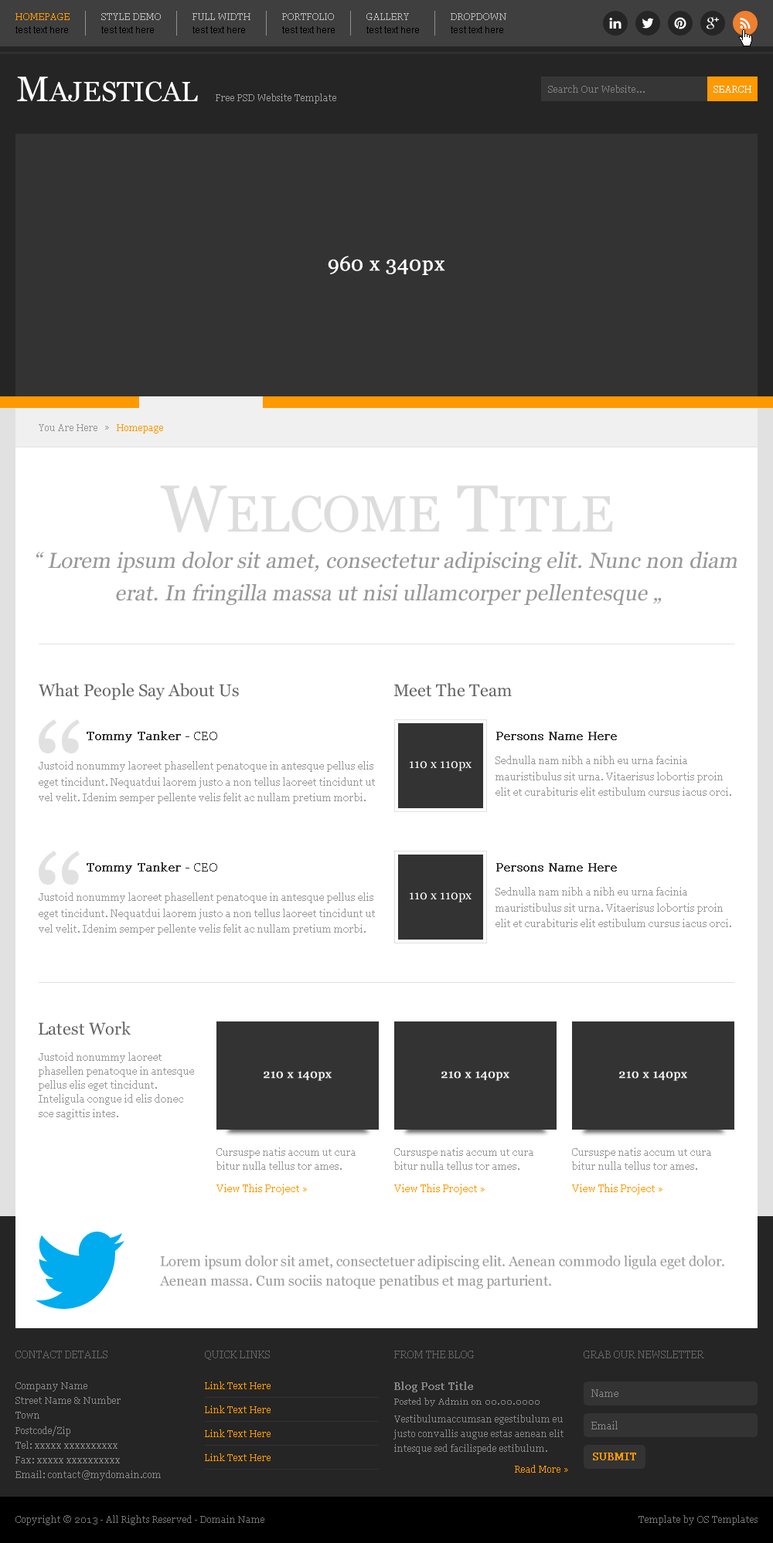
<style>
.page{position:relative;width:773px;height:1543px;background:#ffffff}
.page>*{position:absolute;margin:0}
.t1{font:9.3px "Georgia";color:#ff9900}
.t2{font:9.3px "Georgia";color:#b8b8b8}
.t3{font:9.3px "ArialMT";color:#000000}
.t4{font:27.8px "Georgia";color:#ffffff}
.t5{font:35.5px "Georgia";color:#ffffff}
.t6{font:9.3px "Georgia";color:#7f7f7f}
.t7{font:9.3px "Georgia";color:#ffffff}
.t8{font:9.3px "Georgia";color:#999999}
.t9{font:20.1px "Georgia";color:#ffffff;font-weight:bold}
.t10{font:51px "Georgia";color:#dddddd}
.t11{font:66.5px "Georgia";color:#dddddd}
.t12{font:21.6px/32.5px "Georgia";color:#989898;font-style:italic}
.t13{font:21.6px/21.6px "Georgia";color:#989898;font-style:italic}
.t14{font:17px "Georgia";color:#666666}
.t15{font:12.4px "Georgia";color:#333333;font-weight:bold}
.t16{font:12.4px "Georgia";color:#333333}
.t17{font:10px/16.1px "Georgia";color:#999999}
.t18{font:12.4px "Georgia";color:#ffffff}
.t19{font:10px/14.1px "Georgia";color:#999999}
.t20{font:12.1px "Georgia";color:#f8f8f8;font-weight:bold}
.t21{font:10px/14.1px "Georgia";color:#989898}
.t22{font:10px "Georgia";color:#ff9900}
.t23{font:13.9px/19.5px "Georgia";color:#999999}
.t24{font:10px "Georgia";color:#666666}
.t25{font:9.3px/14.8px "Georgia";color:#868686}
.t26{font:10px "Georgia";color:#868686;font-weight:bold}
.t27{font:8.5px "Georgia";color:#868686}
.t28{font:10px "Georgia";color:#868686}
.t29{font:10px "Georgia";color:#ff9900;font-weight:bold}
.t30{font:9.3px "Georgia";color:#737373}
</style>
<div class="page">
<p class="t1" style="left:15px;top:13px;width:55px;height:7px">HOMEPAGE</p>
<p class="t2" style="left:101px;top:13px;width:60px;height:7px">STYLE DEMO</p>
<p class="t2" style="left:192px;top:13px;width:58px;height:7px">FULL WIDTH</p>
<p class="t2" style="left:282px;top:13px;width:52px;height:7px">PORTFOLIO</p>
<p class="t2" style="left:366px;top:13px;width:43px;height:7px">GALLERY</p>
<p class="t2" style="left:451px;top:13px;width:55px;height:7px">DROPDOWN</p>
<p class="t3" style="left:15px;top:26px;width:53px;height:7px">test text here</p>
<p class="t3" style="left:101px;top:26px;width:53px;height:7px">test text here</p>
<p class="t3" style="left:192px;top:26px;width:53px;height:7px">test text here</p>
<p class="t3" style="left:282px;top:26px;width:53px;height:7px">test text here</p>
<p class="t3" style="left:366px;top:26px;width:53px;height:7px">test text here</p>
<p class="t3" style="left:451px;top:26px;width:52px;height:7px">test text here</p>
<p class="t4" style="left:17px;top:77px;width:181px;height:25px"><span class="t5">M</span>AJESTICAL</p>
<p class="t6" style="left:548px;top:85px;width:96px;height:8px">Search Our Website...</p>
<p class="t7" style="left:713px;top:86px;width:38px;height:7px">SEARCH</p>
<p class="t8" style="left:216px;top:94px;width:120px;height:10px">Free PSD Website Template</p>
<p class="t9" style="left:328px;top:256px;width:117px;height:19px">960 x 340px</p>
<p class="t8" style="left:39px;top:424px;width:58px;height:7px">You Are Here</p>
<p class="t1" style="left:117px;top:424px;width:46px;height:10px">Homepage</p>
<p class="t10" style="left:160px;top:485px;width:453px;height:47px"><span class="t11">W</span>ELCOME<span class="t11"> T</span>ITLE</p>
<p class="t12" style="left:36px;top:551px;width:701px;height:54px;text-align:center"><span class="t13">“</span> Lorem ipsum dolor sit amet, consectetur adipiscing elit. Nunc non diam <br>erat. In fringilla massa ut nisi ullamcorper pellentesque „</p>
<p class="t14" style="left:39px;top:683px;width:200px;height:17px">What People Say About Us</p>
<p class="t14" style="left:393px;top:683px;width:119px;height:14px">Meet The Team</p>
<p class="t15" style="left:87px;top:731px;width:130px;height:12px">Tommy Tanker<span class="t16"> - CEO</span></p>
<p class="t15" style="left:496px;top:732px;width:121px;height:8px">Persons Name Here</p>
<p class="t17" style="left:39px;top:761px;width:336px;height:43px">Justoid nonummy laoreet phasellent penatoque in antesque pellus elis eget tincidunt. Nequatdui laorem justo a non tellus laoreet tincidunt ut vel velit. Idenim semper pellente velis felit ac nullam pretium morbi.</p>
<p class="t18" style="left:410px;top:761px;width:61px;height:10px">110 x 110px</p>
<p class="t17" style="left:495px;top:756px;width:236px;height:40px">Sednulla nam nibh a nibh eu urna facinia mauristibulus sit urna. Vitaerisus lobortis proin elit et curabituris elit estibulum cursus iacus orci.</p>
<p class="t15" style="left:87px;top:862px;width:130px;height:12px">Tommy Tanker<span class="t16"> - CEO</span></p>
<p class="t15" style="left:496px;top:863px;width:121px;height:9px">Persons Name Here</p>
<p class="t17" style="left:39px;top:893px;width:336px;height:42px">Justoid nonummy laoreet phasellent penatoque in antesque pellus elis eget tincidunt. Nequatdui laorem justo a non tellus laoreet tincidunt ut vel velit. Idenim semper pellente velis felit ac nullam pretium morbi.</p>
<p class="t18" style="left:410px;top:893px;width:61px;height:10px">110 x 110px</p>
<p class="t17" style="left:495px;top:887px;width:236px;height:40px">Sednulla nam nibh a nibh eu urna facinia mauristibulus sit urna. Vitaerisus lobortis proin elit et curabituris elit estibulum cursus iacus orci.</p>
<p class="t14" style="left:39px;top:1022px;width:92px;height:13px">Latest Work</p>
<p class="t19" style="left:39px;top:1052px;width:155px;height:68px">Justoid nonummy laoreet phasellen penatoque in antesque pellus elis eget tincidunt. Inteligula congue id elis donec sce sagittis intes.</p>
<p class="t20" style="left:264px;top:1071px;width:68px;height:10px">210 x 140px</p>
<p class="t20" style="left:441px;top:1071px;width:68px;height:10px">210 x 140px</p>
<p class="t20" style="left:619px;top:1071px;width:68px;height:10px">210 x 140px</p>
<p class="t21" style="left:216px;top:1148px;width:139px;height:22px">Cursuspe natis accum ut cura bitur nulla tellus tor ames.</p>
<p class="t21" style="left:394px;top:1148px;width:139px;height:22px">Cursuspe natis accum ut cura bitur nulla tellus tor ames.</p>
<p class="t21" style="left:572px;top:1148px;width:139px;height:22px">Cursuspe natis accum ut cura bitur nulla tellus tor ames.</p>
<p class="t22" style="left:216px;top:1184px;width:91px;height:11px">View This Project »</p>
<p class="t22" style="left:394px;top:1184px;width:91px;height:11px">View This Project »</p>
<p class="t22" style="left:572px;top:1184px;width:90px;height:11px">View This Project »</p>
<p class="t23" style="left:159px;top:1255px;width:565px;height:34px">Lorem ipsum dolor sit amet, consectetuer adipiscing elit. Aenean commodo ligula eget dolor. Aenean massa. Cum sociis natoque penatibus et mag parturient.</p>
<p class="t24" style="left:15px;top:1351px;width:92px;height:7px">CONTACT DETAILS</p>
<p class="t24" style="left:205px;top:1351px;width:65px;height:9px">QUICK LINKS</p>
<p class="t24" style="left:394px;top:1351px;width:80px;height:7px">FROM THE BLOG</p>
<p class="t24" style="left:583px;top:1351px;width:121px;height:7px">GRAB OUR NEWSLETTER</p>
<p class="t25" style="left:15px;top:1382px;width:146px;height:99px">Company Name<br>Street Name &amp; Number<br>Town<br>Postcode/Zip<br>Tel: xxxxx xxxxxxxxxx<br>Fax: xxxxx xxxxxxxxxx<br>Email: contact@mydomain.com</p>
<p class="t1" style="left:205px;top:1382px;width:65px;height:7px">Link Text Here</p>
<p class="t26" style="left:394px;top:1382px;width:79px;height:10px">Blog Post Title</p>
<p class="t27" style="left:394px;top:1398px;width:145px;height:8px">Posted by Admin on 00.00.0000</p>
<p class="t28" style="left:591px;top:1389px;width:27px;height:8px">Name</p>
<p class="t1" style="left:205px;top:1406px;width:65px;height:7px">Link Text Here</p>
<p class="t25" style="left:393px;top:1415px;width:170px;height:39px">Vestibulumaccumsan egestibulum eu justo convallis augue estas aenean elit intesque sed facilispede estibulum.</p>
<p class="t28" style="left:591px;top:1421px;width:26px;height:9px">Email</p>
<p class="t1" style="left:205px;top:1430px;width:65px;height:7px">Link Text Here</p>
<p class="t1" style="left:205px;top:1454px;width:65px;height:7px">Link Text Here</p>
<p class="t29" style="left:593px;top:1453px;width:43px;height:7px">SUBMIT</p>
<p class="t1" style="left:515px;top:1465px;width:53px;height:8px">Read More »</p>
<p class="t30" style="left:15px;top:1515px;width:249px;height:10px">Copyright © 2013 - All Rights Reserved - Domain Name</p>
<p class="t30" style="left:638px;top:1515px;width:119px;height:10px">Template by OS Templates</p>
</div>
